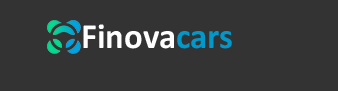
<style>
.page{position:relative;width:338px;height:91px;background:#333333}
.page>*{position:absolute;margin:0}
.t1{font:35.4px "Calibri-Bold";color:#ffffff}
.t2{font:35.4px "Calibri-Bold";color:#0099cc}
</style>
<div class="page">
<p class="t1" style="left:83px;top:24px;width:149px;height:25px">Finova<span class="t2">cars</span></p>
</div>
